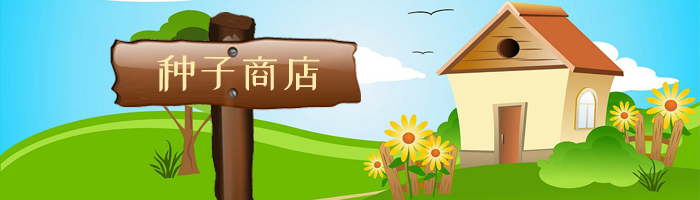
<style>
.page{position:relative;width:700px;height:200px}
.page>*{position:absolute;margin:0}
.t1{font:42px "xiaowei";color:#feedae}
</style>
<div class="page">
<p class="t1" style="left:157px;top:55px;width:163px;height:37px">种子商店</p>
</div>
